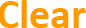
<style>
.page{position:relative;width:86px;height:28px;background:#ffffff}
.page>*{position:absolute;margin:0}
.t1{font:41.7px "Calibri-Bold";color:#ff9900}
</style>
<div class="page">
<p class="t1" style="left:0px;top:0px;width:86px;height:28px">Clear</p>
</div>
